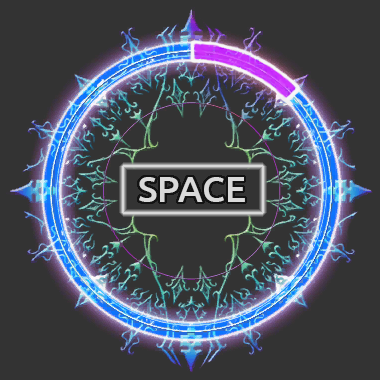
<style>
.page{position:relative;width:380px;height:380px;background:#333333}
.page>*{position:absolute;margin:0}
.t1{font:36px "Ubuntu-Medium";color:#dadada}
</style>
<div class="page">
<p class="t1" style="left:139px;top:177px;width:106px;height:25px">SPACE</p>
</div>
